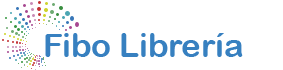
<style>
.page{position:relative;width:283px;height:70px;background:#ffffff}
.page>*{position:absolute;margin:0}
.t1{font:32.5px "ArialRoundedMTBold";color:#3780c0}
</style>
<div class="page">
<p class="t1" style="left:45px;top:33px;width:198px;height:24px">Fibo Librería</p>
</div>
